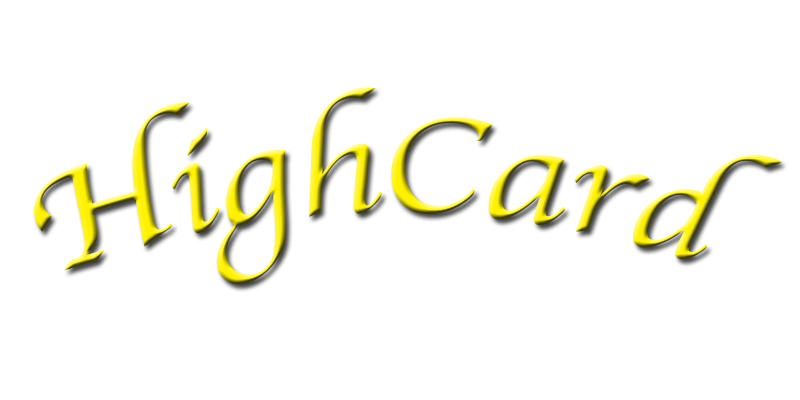
<style>
.page{position:relative;width:800px;height:400px;background:#ffffff}
.page>*{position:absolute;margin:0}
.t1{font:144px "Apple-Chancery"}
</style>
<div class="page">
<p class="t1" style="left:34px;top:87px;width:748px;height:198px">HighCard</p>
</div>
